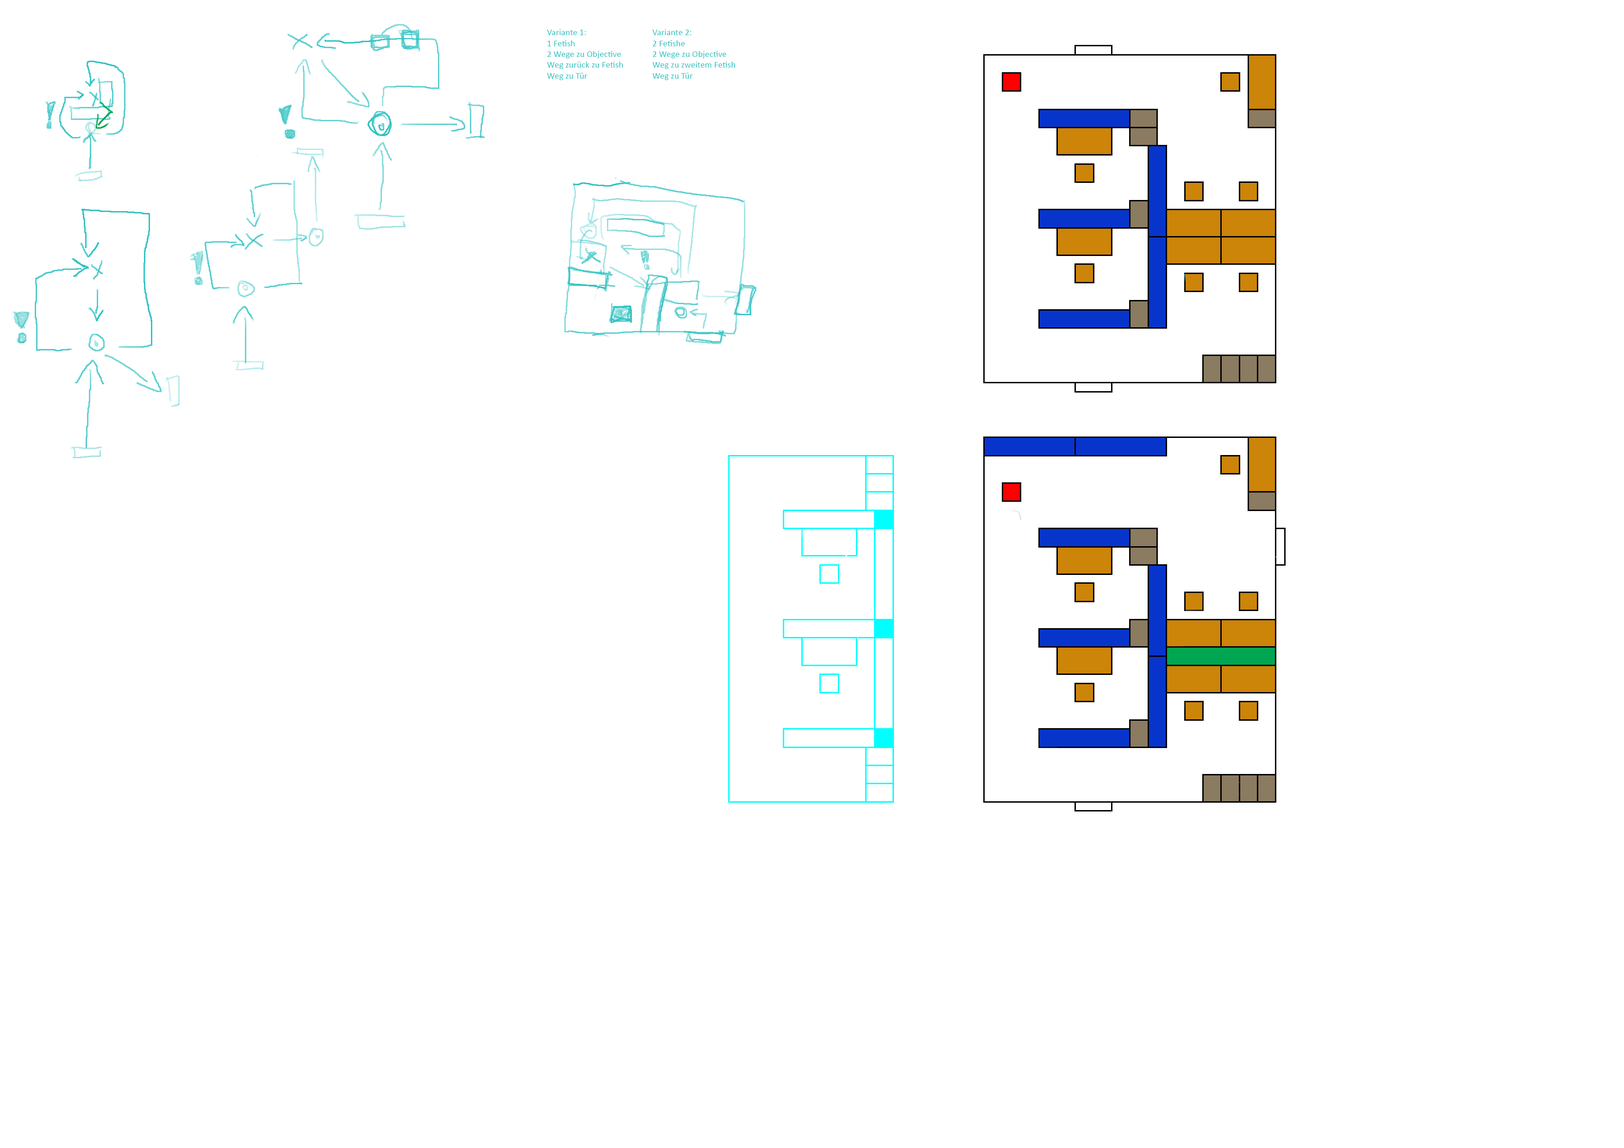
<style>
.page{position:relative;width:1624px;height:1148px;background:#ffffff}
.page>*{position:absolute;margin:0}
.t1{font:9px "Calibri";color:#32c2c3}
</style>
<div class="page">
<p class="t1" style="left:547px;top:29px;width:76px;height:51px">Variante 1:<br>1 Fetish<br>2 Wege zu Objective<br>Weg zurück zu Fetish<br>Weg zu Tür</p>
<p class="t1" style="left:652px;top:29px;width:83px;height:51px">Variante 2:<br>2 Fetishe<br>2 Wege zu Objective<br>Weg zu zweitem Fetish<br>Weg zu Tür</p>
</div>
